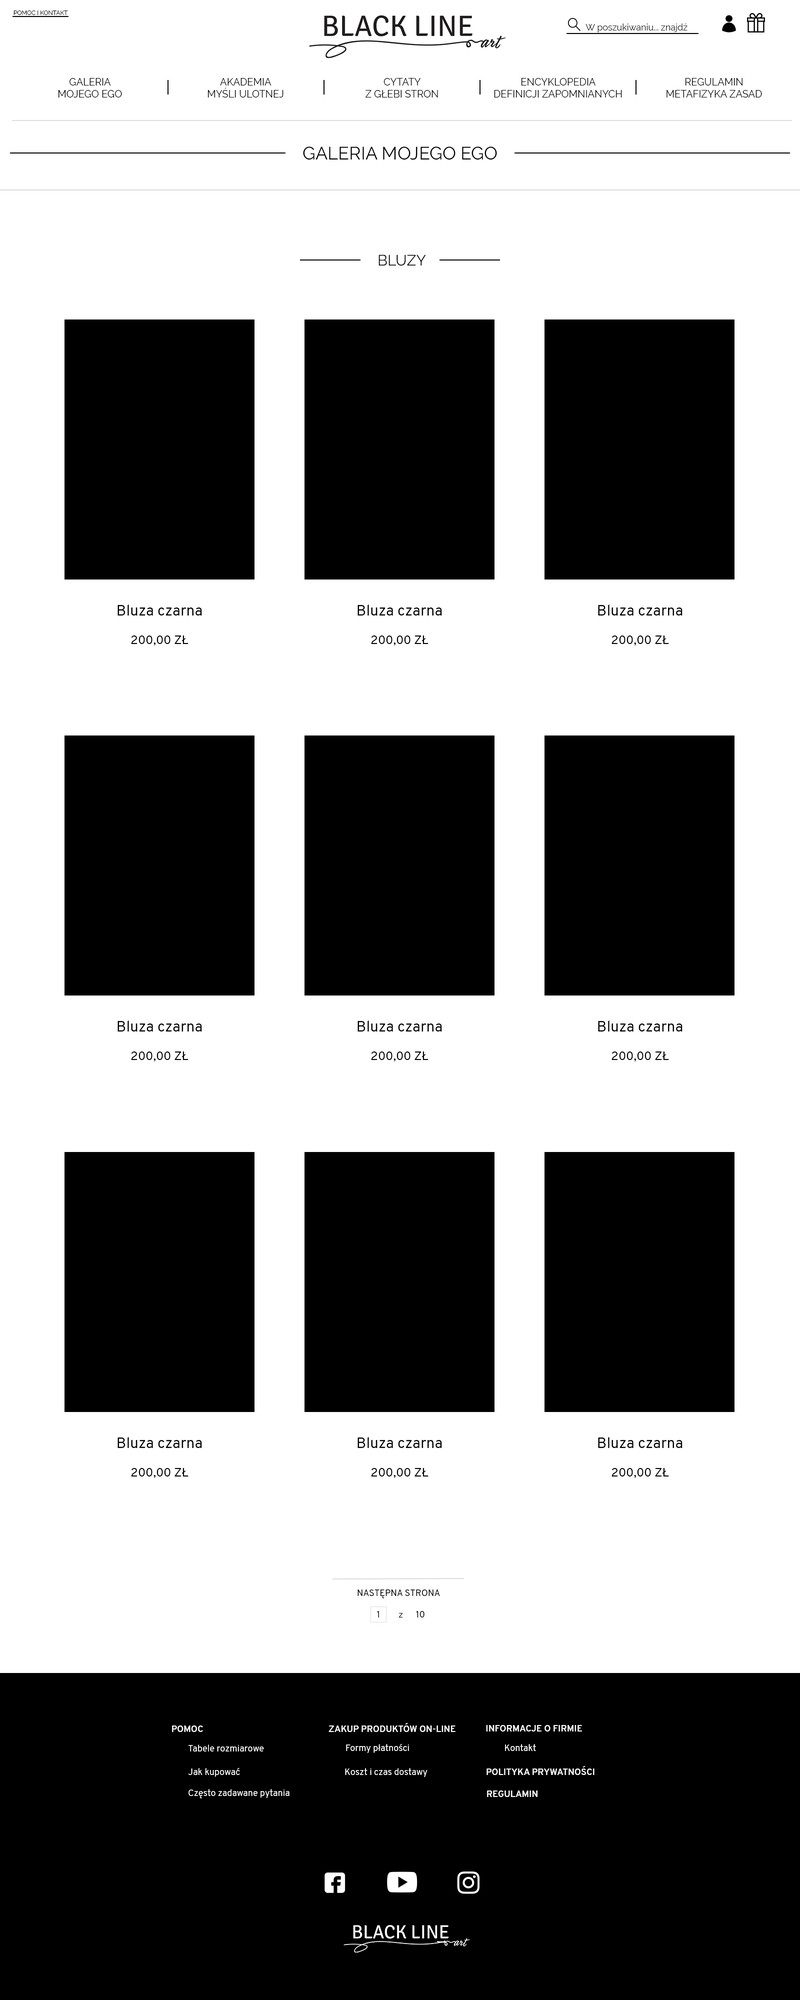
<style>
.page{position:relative;width:800px;height:2000px;background:#ffffff}
.page>*{position:absolute;margin:0}
.t1{font:6px "Raleway-Regular";color:#010000}
.t2{font:9px "Raleway-Regular";color:#322e2e}
.t3{font:10px "Raleway-Regular";color:#010000}
.t4{font:18px "Raleway-Regular";color:#000000}
.t5{font:15px "Raleway-Regular";color:#000000}
.t6{font:15px "Overpass-Regular";color:#000000}
.t7{font:12px "Overpass-Regular";color:#000000}
.t8{font:9px "Overpass-Regular";color:#010000}
.t9{font:7px "Overpass-Regular";color:#010000}
.t10{font:9px "Overpass-Bold";color:#fefefe}
.t11{font:9px "Overpass-Regular";color:#fefefe}
</style>
<div class="page">
<p class="t1" style="left:14px;top:10px;width:54px;height:5px">POMOC I KONTAKT</p>
<p class="t2" style="left:586px;top:24px;width:102px;height:8px">W poszukiwaniu... znajdź</p>
<p class="t3" style="left:58px;top:78px;width:64px;height:20px;text-align:center">GALERIA<br>MOJEGO EGO</p>
<p class="t3" style="left:208px;top:78px;width:76px;height:20px;text-align:center">AKADEMIA<br>MYŚLI ULOTNEJ</p>
<p class="t3" style="left:366px;top:78px;width:72px;height:20px;text-align:center">CYTATY<br>Z GŁEBI STRON</p>
<p class="t3" style="left:494px;top:78px;width:128px;height:20px;text-align:center">ENCYKLOPEDIA<br>DEFINICJI ZAPOMNIANYCH</p>
<p class="t3" style="left:666px;top:78px;width:96px;height:20px;text-align:center">REGULAMIN<br>METAFIZYKA ZASAD</p>
<p class="t4" style="left:303px;top:146px;width:194px;height:14px">GALERIA MOJEGO EGO</p>
<p class="t5" style="left:378px;top:254px;width:48px;height:12px">BLUZY</p>
<p class="t6" style="left:118px;top:604px;width:84px;height:42px;text-align:center">Bluza czarna<br><span class="t7"><br>200,00 ZŁ</span></p>
<p class="t6" style="left:358px;top:604px;width:84px;height:42px;text-align:center">Bluza czarna<br><span class="t7"><br>200,00 ZŁ</span></p>
<p class="t6" style="left:598px;top:604px;width:84px;height:42px;text-align:center">Bluza czarna<br><span class="t7"><br>200,00 ZŁ</span></p>
<p class="t6" style="left:118px;top:1020px;width:84px;height:42px;text-align:center">Bluza czarna<br><span class="t7"><br>200,00 ZŁ</span></p>
<p class="t6" style="left:358px;top:1020px;width:84px;height:42px;text-align:center">Bluza czarna<span class="t7"> <br><br>200,00 ZŁ</span></p>
<p class="t6" style="left:598px;top:1020px;width:84px;height:42px;text-align:center">Bluza czarna<br><span class="t7"><br>200,00 ZŁ</span></p>
<p class="t6" style="left:118px;top:1437px;width:84px;height:41px;text-align:center">Bluza czarna<br><span class="t7"><br>200,00 ZŁ</span></p>
<p class="t6" style="left:358px;top:1437px;width:84px;height:41px;text-align:center">Bluza czarna<span class="t7"> <br><br>200,00 ZŁ</span></p>
<p class="t6" style="left:598px;top:1437px;width:84px;height:41px;text-align:center">Bluza czarna<br><span class="t7"><br>200,00 ZŁ</span></p>
<p class="t8" style="left:358px;top:1590px;width:82px;height:8px">NASTĘPNA STRONA</p>
<p class="t8" style="left:377px;top:1611px;width:2px;height:7px">1</p>
<p class="t9" style="left:398px;top:1613px;width:5px;height:5px">Z</p>
<p class="t8" style="left:416px;top:1611px;width:8px;height:7px">10</p>
<p class="t10" style="left:172px;top:1726px;width:31px;height:6px">POMOC</p>
<p class="t10" style="left:328px;top:1723px;width:128px;height:9px">ZAKUP PRODUKTÓW ON-LINE</p>
<p class="t10" style="left:486px;top:1725px;width:96px;height:7px">INFORMACJE O FIRMIE</p>
<p class="t11" style="left:188px;top:1744px;width:76px;height:8px">Tabele rozmiarowe</p>
<p class="t11" style="left:346px;top:1744px;width:63px;height:9px">Formy płatności</p>
<p class="t11" style="left:505px;top:1744px;width:31px;height:7px">Kontakt</p>
<p class="t11" style="left:188px;top:1768px;width:52px;height:9px">Jak kupować</p>
<p class="t11" style="left:345px;top:1768px;width:83px;height:9px">Koszt i czas dostawy</p>
<p class="t10" style="left:486px;top:1766px;width:108px;height:9px">POLITYKA PRYWATNOŚCI</p>
<p class="t11" style="left:188px;top:1789px;width:102px;height:9px">Często zadawane pytania</p>
<p class="t10" style="left:487px;top:1790px;width:51px;height:7px">REGULAMIN</p>
</div>
